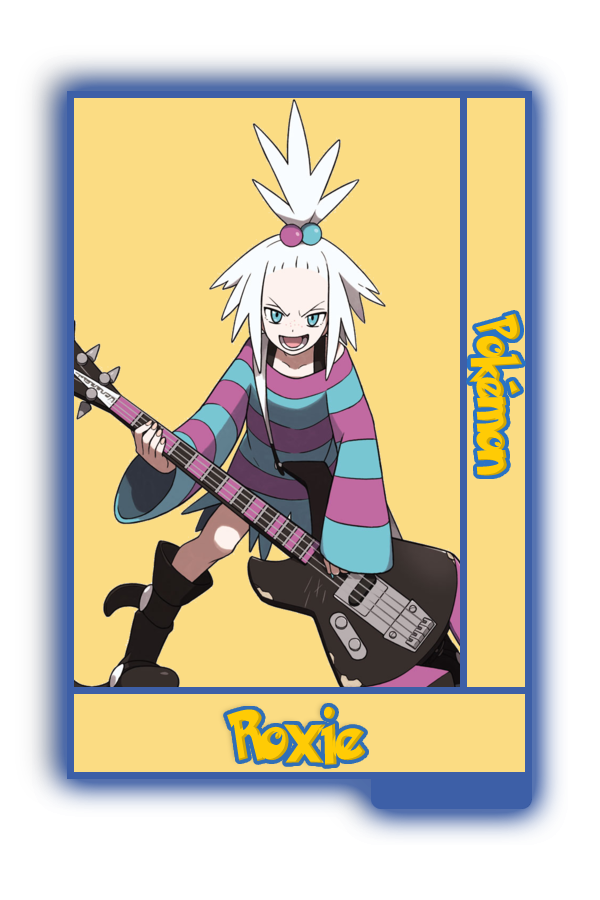
<style>
.page{position:relative;width:600px;height:900px;background:#fbdc83}
.page>*{position:absolute;margin:0}
.t1{font:48.8px "PokemonSolidNormal";color:#ffcb05;scale:0.8 1}
.t2{font:56.6px "PokemonSolidNormal";color:#ffcb05;scale:0.92 1}
</style>
<div class="page">
<p class="t1" style="left:469px;top:313px;width:54px;height:163px;rotate:90deg">Pokémon</p>
<p class="t2" style="left:227px;top:706px;width:139px;height:59px">Roxie</p>
</div>
